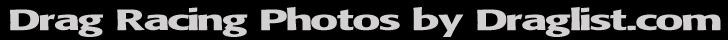
<style>
.page{position:relative;width:728px;height:40px;background:#000000}
.page>*{position:absolute;margin:0}
.t1{font:32px "MARKETPRO-Normal";color:#d2d0d0}
</style>
<div class="page">
<p class="t1" style="left:10px;top:7px;width:711px;height:30px">Drag Racing Photos by Draglist.com</p>
</div>
